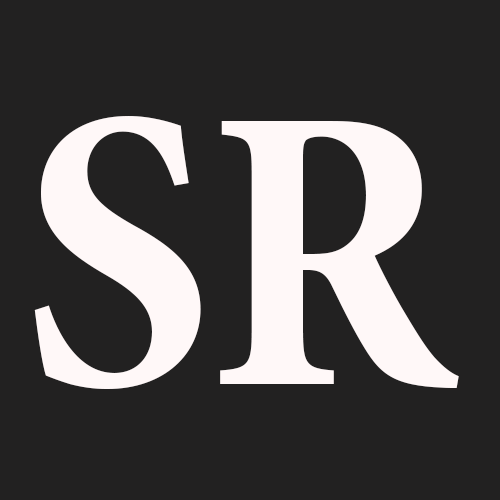
<style>
.page{position:relative;width:500px;height:500px;background:#222121}
.page>*{position:absolute;margin:0}
.t1{font:410px "MinionPro-BoldCn";color:#fff8f8}
</style>
<div class="page">
<p class="t1" style="left:34px;top:116px;width:425px;height:273px">SR</p>
</div>
